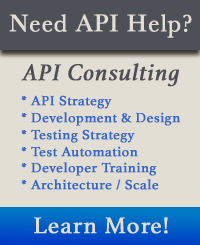
<style>
.page{position:relative;width:200px;height:245px;background:#e3ded4}
.page>*{position:absolute;margin:0}
.t1{font:25px "Baskerville";letter-spacing:0.025em;color:#e3ddd3;font-weight:bold}
.t2{font:24px "Athelas-Italic";letter-spacing:0.025em;color:#4e4f56;font-weight:bold}
.t3{font:14px "Athelas-Regular";letter-spacing:0.025em;color:#3765c9;font-weight:bold}
.t4{font:24px "Athelas-Regular";letter-spacing:0.025em;color:#e3ddd3;font-weight:bold}
</style>
<div class="page">
<p class="t1" style="left:9px;top:14px;width:183px;height:24px">Need API Help?</p>
<p class="t2" style="left:21px;top:63px;width:159px;height:24px">API Consulting</p>
<p class="t3" style="left:21px;top:95px;width:160px;height:95px">* API Strategy<br>* Development &amp; Design<br>* Testing Strategy<br>* Test Automation<br>* Developer Training<br>* Architecture / Scale</p>
<p class="t4" style="left:34px;top:217px;width:134px;height:17px">Learn More!</p>
</div>
